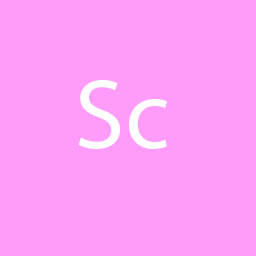
<style>
.page{position:relative;width:256px;height:256px;background:#ff9bf9}
.page>*{position:absolute;margin:0}
.t1{font:100px "MyriadPro-Regular";color:#ffffff}
</style>
<div class="page">
<p class="t1" style="left:78px;top:80px;width:89px;height:69px">Sc</p>
</div>
